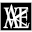
<style>
.page{position:relative;width:32px;height:32px;background:#000000}
.page>*{position:absolute;margin:0}
.t1{font:12.6px "Microsoft-Himalaya";color:#ffffff;scale:0.67 1}
.t2{font:11px "Microsoft-Himalaya";color:#ffffff;scale:0.67 1}
.t3{font:7.1px "Microsoft-Himalaya";color:#ffffff;scale:1.49 1}
.t4{font:11.2px "Microsoft-Himalaya";color:#ffffff;scale:0.67 1}
</style>
<div class="page">
<p class="t1" style="left:3px;top:4px;width:17px;height:25px;text-align:center">A</p>
<p class="t2" style="left:3px;top:7px;width:16px;height:22px;text-align:center">V</p>
<p class="t3" style="left:13px;top:7px;width:14px;height:21px;rotate:90deg">V</p>
<p class="t4" style="left:17px;top:7px;width:13px;height:22px;text-align:center">E</p>
</div>
